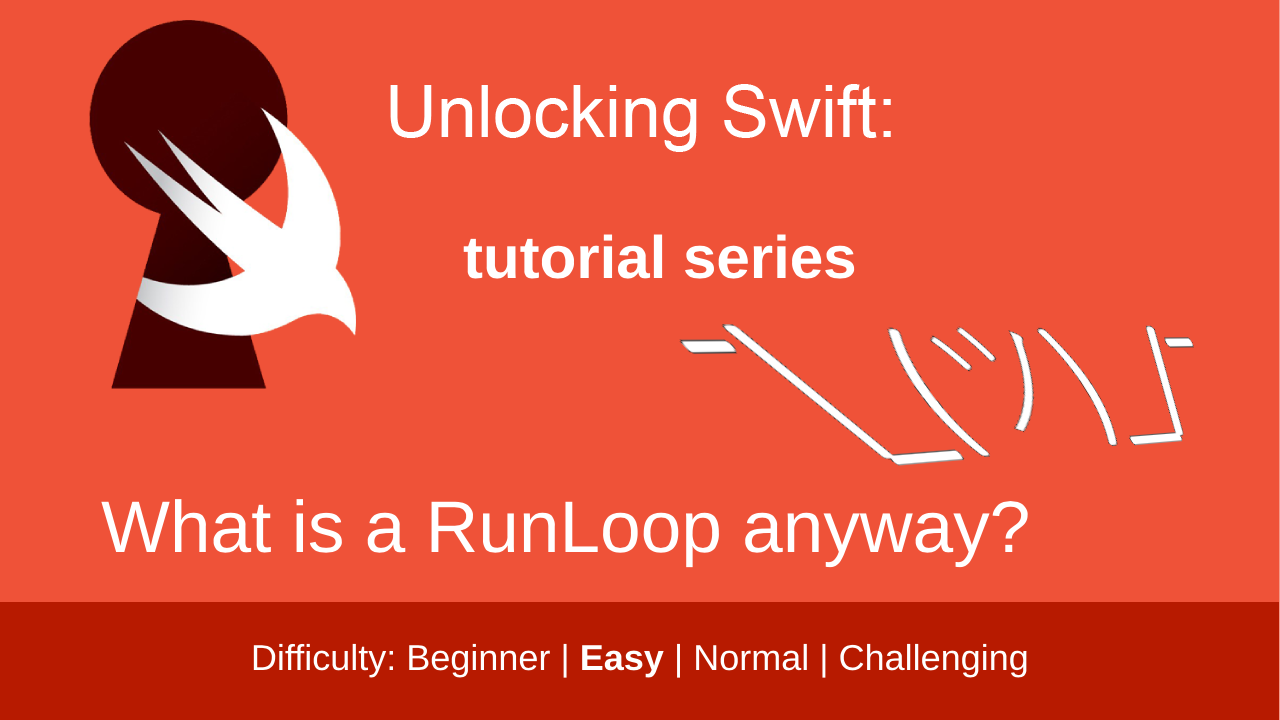
<style>
.page{position:relative;width:1280px;height:720px;background:#ef5238}
.page>*{position:absolute;margin:0}
.t1{font:72px "ArialMT";color:#ffffff}
.t2{font:60px "Arial-BoldMT";color:#ffffff}
.t3{font:73px "ArialMT";color:#ffffff}
.t4{font:36px "ArialMT";color:#ffffff}
.t5{font:36px "Arial-BoldMT";color:#ffffff}
</style>
<div class="page">
<p class="t1" style="left:390px;top:84px;width:501px;height:68px">Unlocking Swift:</p>
<p class="t2" style="left:463px;top:234px;width:392px;height:45px">tutorial series</p>
<p class="t3" style="left:101px;top:499px;width:927px;height:69px">What is a RunLoop anyway?</p>
<p class="t4" style="left:253px;top:643px;width:774px;height:35px">Difficulty: Beginner | <span class="t5">Easy </span>| Normal | Challenging</p>
</div>
